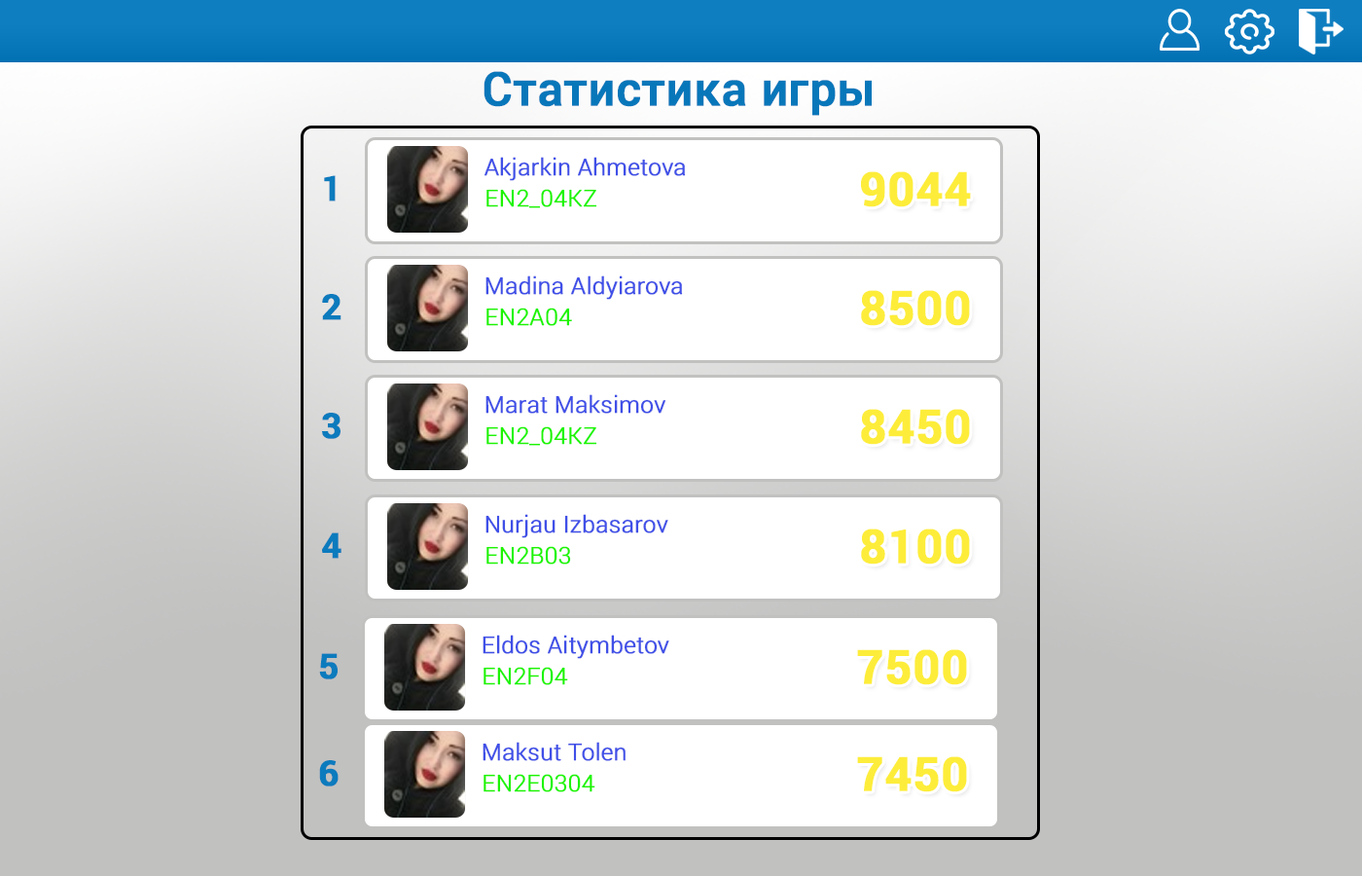
<style>
.page{position:relative;width:1362px;height:876px;background:#ffffff}
.page>*{position:absolute;margin:0}
.t1{font:46.7px "Roboto-Medium";color:#0877ba;font-weight:bold}
.t2{font:23.3px "Roboto-Light";color:#3f4fe7;font-weight:bold}
.t3{font:46.7px "Roboto-Bold";color:#fded3a;font-weight:bold}
.t4{font:35px "Roboto-Bold";color:#0c7bbd;font-weight:bold}
.t5{font:23.3px "Roboto-Light";color:#1df400;font-weight:bold}
</style>
<div class="page">
<p class="t1" style="left:483px;top:71px;width:389px;height:45px">Статистика игры</p>
<p class="t2" style="left:484px;top:157px;width:202px;height:24px">Akjarkin Ahmetova</p>
<p class="t3" style="left:861px;top:171px;width:110px;height:36px">9044</p>
<p class="t4" style="left:324px;top:175px;width:12px;height:26px">1</p>
<p class="t5" style="left:486px;top:189px;width:111px;height:19px">EN2_04KZ</p>
<p class="t2" style="left:485px;top:275px;width:198px;height:25px">Madina Aldyiarova</p>
<p class="t4" style="left:322px;top:294px;width:19px;height:26px">2</p>
<p class="t3" style="left:861px;top:290px;width:109px;height:36px">8500</p>
<p class="t5" style="left:486px;top:307px;width:86px;height:19px">EN2A04</p>
<p class="t2" style="left:485px;top:394px;width:180px;height:19px">Marat Maksimov</p>
<p class="t4" style="left:322px;top:412px;width:18px;height:27px">3</p>
<p class="t3" style="left:861px;top:409px;width:109px;height:36px">8450</p>
<p class="t5" style="left:486px;top:426px;width:111px;height:20px">EN2_04KZ</p>
<p class="t2" style="left:485px;top:514px;width:183px;height:24px">Nurjau Izbasarov</p>
<p class="t4" style="left:322px;top:532px;width:19px;height:26px">4</p>
<p class="t3" style="left:861px;top:528px;width:109px;height:36px">8100</p>
<p class="t5" style="left:486px;top:546px;width:85px;height:18px">EN2B03</p>
<p class="t2" style="left:483px;top:634px;width:186px;height:25px">Eldos Aitymbetov</p>
<p class="t4" style="left:319px;top:653px;width:19px;height:26px">5</p>
<p class="t3" style="left:857px;top:649px;width:110px;height:36px">7500</p>
<p class="t5" style="left:483px;top:666px;width:85px;height:19px">EN2F04</p>
<p class="t2" style="left:483px;top:741px;width:143px;height:20px">Maksut Tolen</p>
<p class="t4" style="left:319px;top:760px;width:20px;height:26px">6</p>
<p class="t3" style="left:857px;top:756px;width:110px;height:36px">7450</p>
<p class="t5" style="left:483px;top:773px;width:112px;height:19px">EN2E0304</p>
</div>
